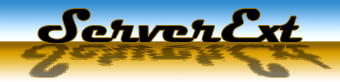
<style>
.page{position:relative;width:340px;height:82px}
.page>*{position:absolute;margin:0}
.t1{font:48px "Magneto-Bold";color:#000000}
</style>
<div class="page">
<p class="t1" style="left:38px;top:9px;width:264px;height:35px">ServerExt</p>
</div>
